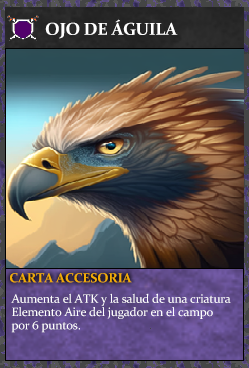
<style>
.page{position:relative;width:249px;height:368px}
.page>*{position:absolute;margin:0}
.t1{font:17.3px "Constantia-Bold";letter-spacing:-0.02em;color:#ffffff}
.t2{font:13.3px "Constantia-Bold";letter-spacing:-0.02em;color:#f2ac05}
.t3{font:12.3px/13.3px "Constantia";letter-spacing:-0.02em;color:#ffffff}
</style>
<div class="page">
<p class="t1" style="left:45px;top:19px;width:133px;height:20px">OJO DE ÁGUILA</p>
<p class="t2" style="left:10px;top:273px;width:122px;height:10px">CARTA ACCESORIA</p>
<p class="t3" style="left:11px;top:293px;width:220px;height:40px">Aumenta el ATK y la salud de una criatura<br>Elemento Aire del jugador en el campo <br>por 6 puntos.</p>
</div>
